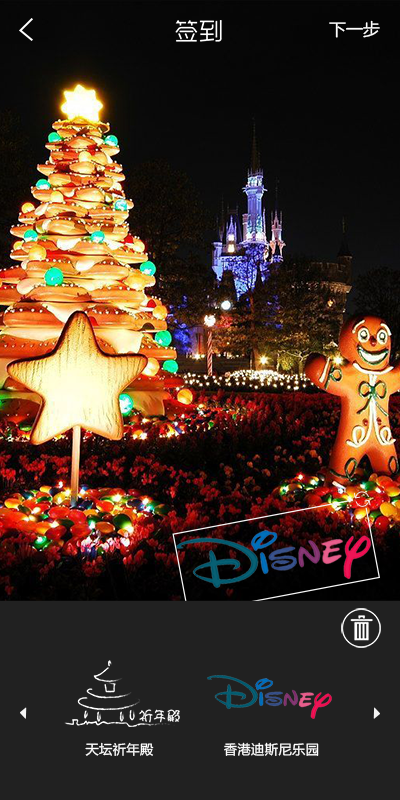
<style>
.page{position:relative;width:400px;height:800px;background:#212121}
.page>*{position:absolute;margin:0}
.t1{font:23.9px "RTWSYueGoDemo-Regular";color:#ffffff}
.t2{font:16.8px "MicrosoftYaHei";color:#ffffff}
.t3{font:13.2px "MicrosoftYaHei";letter-spacing:0.025em;color:#ffffff}
</style>
<div class="page">
<p class="t1" style="left:175px;top:20px;width:47px;height:22px">签到</p>
<p class="t2" style="left:329px;top:20px;width:51px;height:18px">下一步</p>
<p class="t3" style="left:85px;top:742px;width:69px;height:14px">天坛祈年殿</p>
<p class="t3" style="left:224px;top:742px;width:95px;height:14px">香港迪斯尼乐园</p>
</div>
